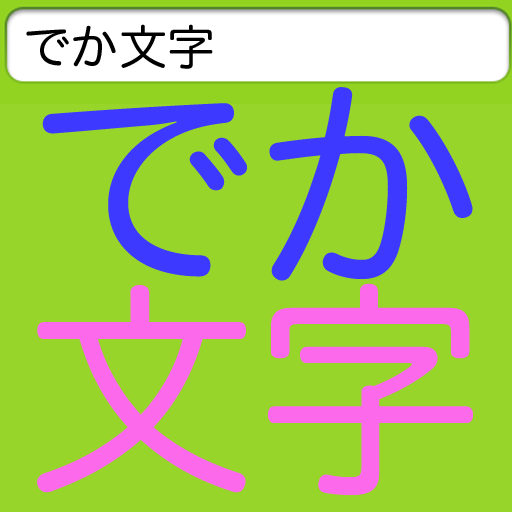
<style>
.page{position:relative;width:512px;height:512px;background:#97d52b}
.page>*{position:absolute;margin:0}
.t1{font:47.8px "HiraMaruPro-W4";color:#000000}
.t2{font:229.1px "HiraMaruPro-W4";color:#3d39ff}
.t3{font:229.1px "HiraMaruPro-W4";color:#fc69eb}
</style>
<div class="page">
<p class="t1" style="left:26px;top:24px;width:187px;height:45px">でか文字</p>
<p class="t2" style="left:42px;top:87px;width:431px;height:194px">でか</p>
<p class="t3" style="left:37px;top:283px;width:436px;height:213px">文字</p>
</div>
